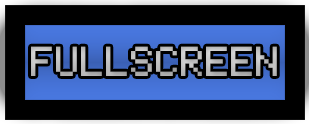
<style>
.page{position:relative;width:309px;height:124px;background:#000000}
.page>*{position:absolute;margin:0}
.t1{font:33.3px "Space-Invaders";color:#bdbdbd}
</style>
<div class="page">
<p class="t1" style="left:31px;top:46px;width:246px;height:30px">FullScreen</p>
</div>
